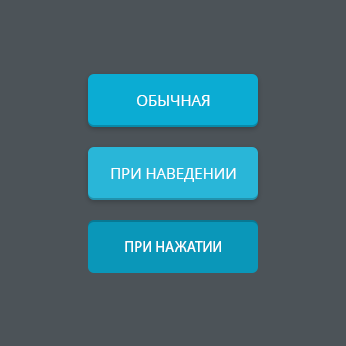
<style>
.page{position:relative;width:346px;height:346px;background:#4c5358}
.page>*{position:absolute;margin:0}
.t1{font:15px "OpenSans";color:#ffffff;text-transform:uppercase}
.t2{font:15px "MyriadPro-Regular";color:#ffffff;text-transform:uppercase}
</style>
<div class="page">
<p class="t1" style="left:137px;top:95px;width:73px;height:11px">обычная</p>
<p class="t1" style="left:111px;top:168px;width:125px;height:14px">при наведении</p>
<p class="t2" style="left:125px;top:241px;width:96px;height:11px">при нажатии</p>
</div>
